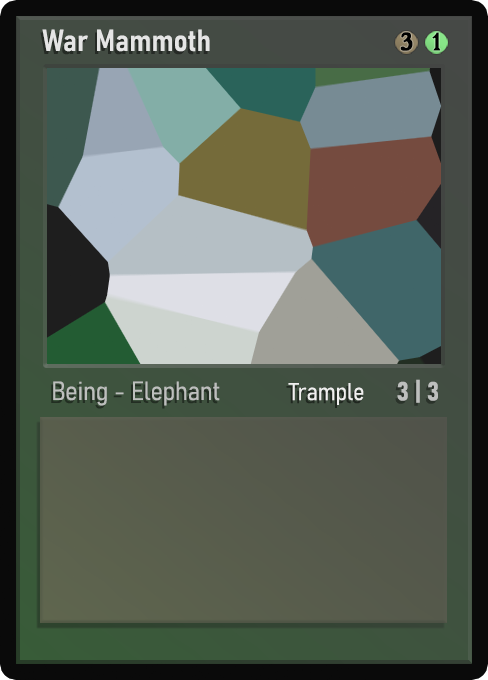
<style>
.page{position:relative;width:488px;height:680px}
.page>*{position:absolute;margin:0}
.t1{font:30px "Bahnschrift-SemiBoldSemiCondensed";color:#f2f2f2;font-weight:bold}
.t2{font:25px "WTRRoycroft";color:#000000;font-weight:bold;scale:1.09 1}
.t3{font:26px "Bahnschrift-LightSemiCondensed";color:#c8c8c8;font-weight:bold}
.t4{font:24px "Bahnschrift-LightSemiCondensed";color:#f0efef;font-weight:bold}
.t5{font:26px "Bahnschrift-BoldSemiCondensed";color:#bdbfbd;font-weight:bold}
</style>
<div class="page">
<p class="t1" style="left:42px;top:29px;width:168px;height:23px;opacity:0.9">War Mammoth</p>
<p class="t2" style="left:400px;top:32px;width:13px;height:19px">3</p>
<p class="t2" style="left:432px;top:32px;width:9px;height:19px">1</p>
<p class="t3" style="left:53px;top:381px;width:167px;height:25px;opacity:0.9">Being - Elephant</p>
<p class="t4" style="left:288px;top:383px;width:76px;height:22px">Trample</p>
<p class="t5" style="left:397px;top:379px;width:41px;height:24px">3 | 3</p>
</div>
